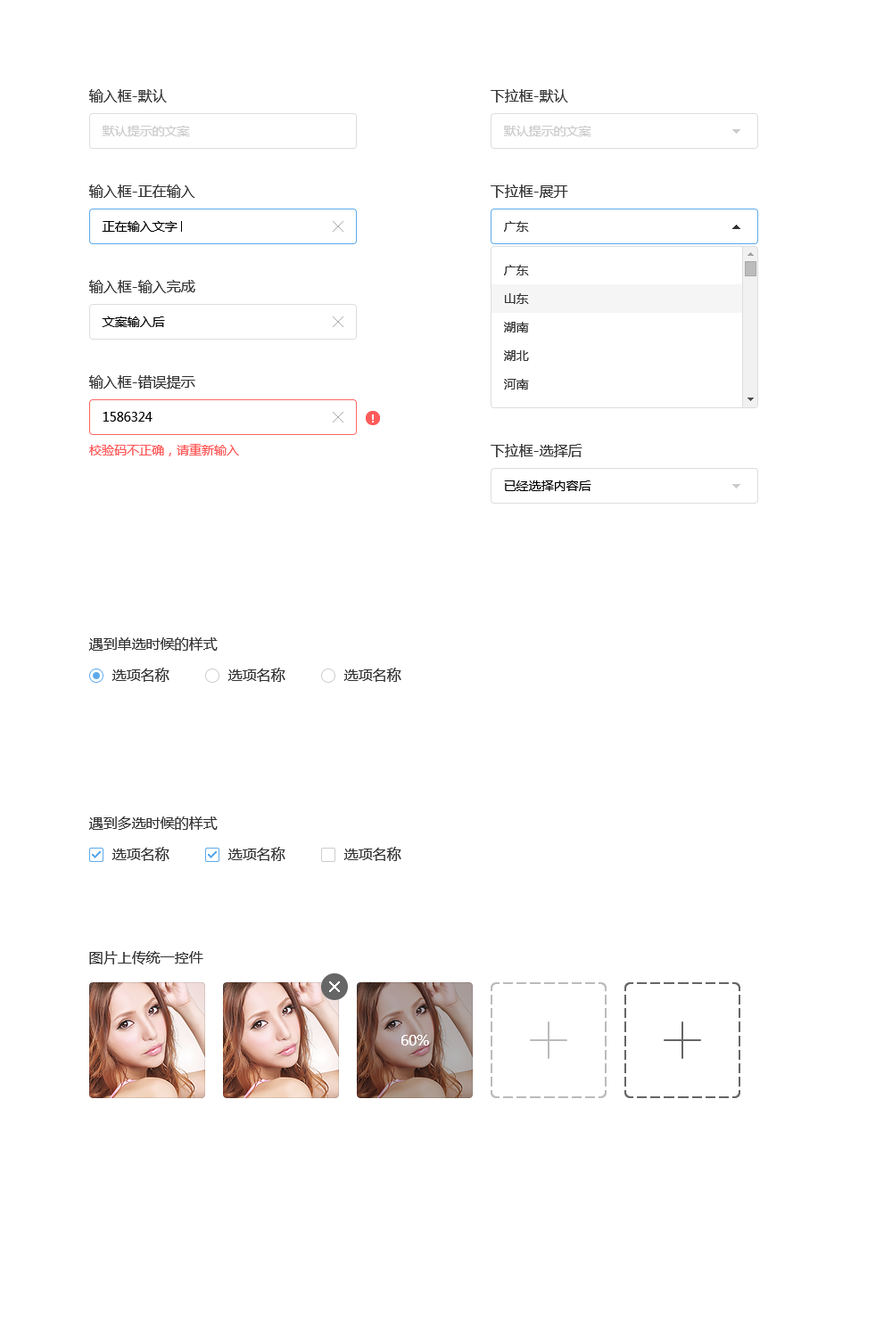
<style>
.page{position:relative;width:892px;height:1337px;background:#ffffff}
.page>*{position:absolute;margin:0}
.t1{font:14.3px "MicrosoftYaHei";color:#333333}
.t2{font:12.5px "MicrosoftYaHei";color:#cccccc}
.t3{font:12.5px "MicrosoftYaHei";color:#000000}
.t4{font:12.5px "MicrosoftYaHei";color:#333333}
.t5{font:12.5px "MicrosoftYaHei";color:#ff5959}
.t6{font:14.3px "MicrosoftYaHei";color:#ffffff}
</style>
<div class="page">
<p class="t1" style="left:89px;top:89px;width:78px;height:14px">输入框-默认</p>
<p class="t1" style="left:490px;top:89px;width:78px;height:14px">下拉框-默认</p>
<p class="t2" style="left:103px;top:126px;width:87px;height:10px">默认提示的文案</p>
<p class="t2" style="left:504px;top:126px;width:87px;height:10px">默认提示的文案</p>
<p class="t1" style="left:89px;top:185px;width:106px;height:13px">输入框-正在输入</p>
<p class="t1" style="left:490px;top:185px;width:78px;height:13px">下拉框-展开</p>
<p class="t3" style="left:102px;top:221px;width:75px;height:11px">正在输入文字</p>
<p class="t4" style="left:504px;top:221px;width:25px;height:11px">广东</p>
<p class="t4" style="left:504px;top:265px;width:25px;height:11px">广东</p>
<p class="t1" style="left:89px;top:280px;width:106px;height:13px">输入框-输入完成</p>
<p class="t4" style="left:505px;top:293px;width:24px;height:11px">山东</p>
<p class="t3" style="left:102px;top:317px;width:63px;height:10px">文案输入后</p>
<p class="t4" style="left:504px;top:322px;width:25px;height:11px">湖南</p>
<p class="t4" style="left:504px;top:350px;width:25px;height:11px">湖北</p>
<p class="t1" style="left:89px;top:375px;width:106px;height:14px">输入框-错误提示</p>
<p class="t4" style="left:504px;top:379px;width:25px;height:11px">河南</p>
<p class="t3" style="left:103px;top:412px;width:49px;height:10px">1586324</p>
<p class="t5" style="left:89px;top:444px;width:150px;height:13px">校验码不正确，请重新输入</p>
<p class="t1" style="left:490px;top:444px;width:92px;height:13px">下拉框-选择后</p>
<p class="t3" style="left:504px;top:481px;width:87px;height:10px">已经选择内容后</p>
<p class="t1" style="left:89px;top:637px;width:129px;height:14px">遇到单选时候的样式</p>
<p class="t1" style="left:112px;top:668px;width:57px;height:14px">选项名称</p>
<p class="t1" style="left:228px;top:668px;width:57px;height:14px">选项名称</p>
<p class="t1" style="left:344px;top:668px;width:57px;height:14px">选项名称</p>
<p class="t1" style="left:89px;top:817px;width:129px;height:13px">遇到多选时候的样式</p>
<p class="t1" style="left:112px;top:847px;width:57px;height:14px">选项名称</p>
<p class="t1" style="left:228px;top:847px;width:57px;height:14px">选项名称</p>
<p class="t1" style="left:344px;top:847px;width:57px;height:14px">选项名称</p>
<p class="t1" style="left:89px;top:951px;width:114px;height:14px">图片上传统一控件</p>
<p class="t6" style="left:401px;top:1035px;width:28px;height:11px">60%</p>
</div>
